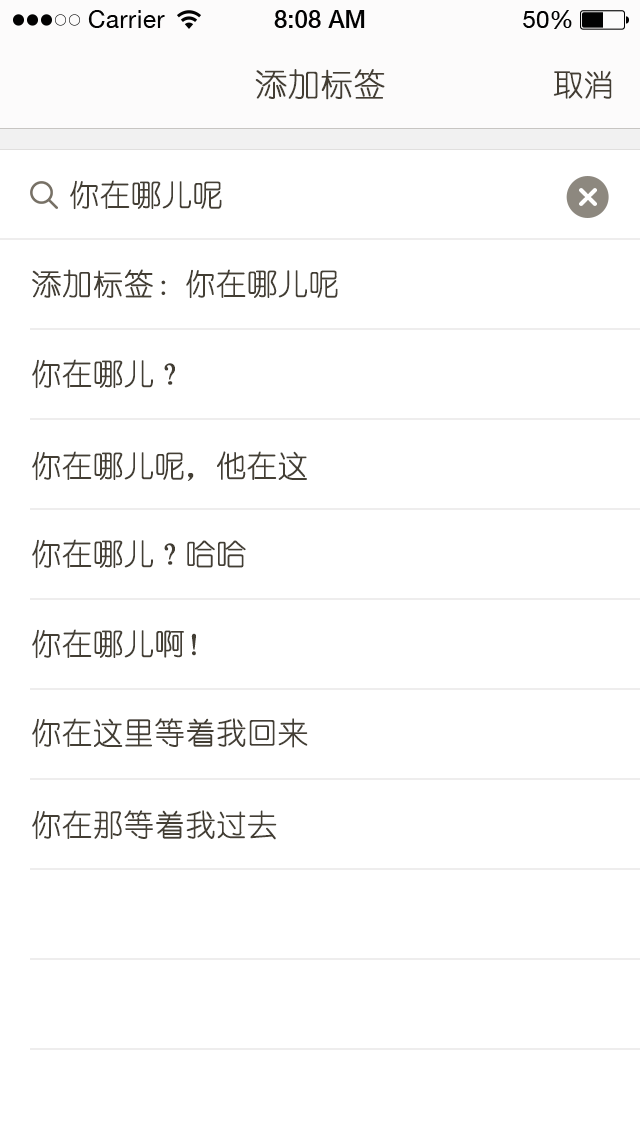
<style>
.page{position:relative;width:640px;height:1136px;background:#ffffff}
.page>*{position:absolute;margin:0}
.t1{font:32px "YouYuan";color:#433d33;text-transform:uppercase;font-weight:bold}
.t2{font:30px "YouYuan";color:#433d33;text-transform:uppercase;font-weight:bold}
.t3{font:30px "YouYuan";color:#433e34;text-transform:uppercase;font-weight:bold}
</style>
<div class="page">
<p class="t1" style="left:255px;top:69px;width:130px;height:31px">添加标签</p>
<p class="t2" style="left:553px;top:70px;width:59px;height:29px">取消</p>
<p class="t3" style="left:70px;top:180px;width:152px;height:30px">你在哪儿呢</p>
<p class="t3" style="left:32px;top:269px;width:306px;height:30px">添加标签：你在哪儿呢</p>
<p class="t3" style="left:32px;top:359px;width:143px;height:30px">你在哪儿？</p>
<p class="t3" style="left:32px;top:451px;width:275px;height:30px">你在哪儿呢，他在这</p>
<p class="t3" style="left:32px;top:539px;width:214px;height:30px">你在哪儿？哈哈</p>
<p class="t3" style="left:32px;top:629px;width:164px;height:30px">你在哪儿啊！</p>
<p class="t3" style="left:32px;top:718px;width:276px;height:30px">你在这里等着我回来</p>
<p class="t3" style="left:32px;top:810px;width:245px;height:30px">你在那等着我过去</p>
</div>
